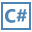
<style>
.page{position:relative;width:32px;height:32px;background:#ffffff}
.page>*{position:absolute;margin:0}
.t1{font:19px "SegoeUI-Bold";color:#4d86b4}
</style>
<div class="page">
<p class="t1" style="left:5px;top:9px;width:22px;height:14px">C#</p>
</div>
